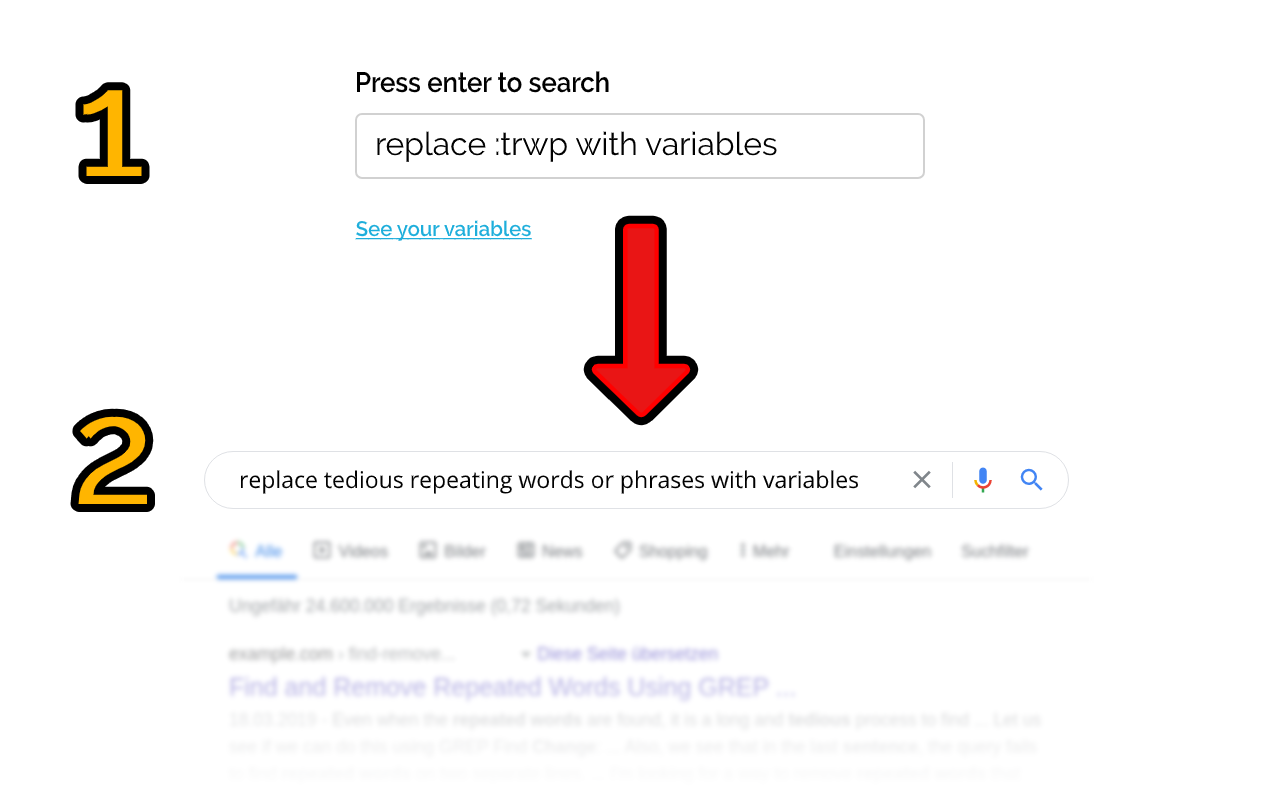
<style>
.page{position:relative;width:1280px;height:800px;background:#ffffff}
.page>*{position:absolute;margin:0}
.t1{font:28px "Raleway-SemiBold";color:#000000;scale:0.92 1}
.t2{font:150px "Raleway-Regular";color:#ffb500;font-weight:bold}
.t3{font:32px "Raleway-Regular";color:#000000}
.t4{font:21px "Raleway-SemiBold";color:#1eaedb;text-decoration:underline;scale:0.97 1}
.t5{font:23px "OpenSans-Regular";color:#000000}
</style>
<div class="page">
<p class="t1" style="left:357px;top:71px;width:252px;height:22px">Press enter to search</p>
<p class="t2" style="left:83px;top:90px;width:59px;height:86px">1</p>
<p class="t3" style="left:377px;top:131px;width:400px;height:31px">replace :trwp with variables</p>
<p class="t4" style="left:355px;top:220px;width:177px;height:21px">See your variables</p>
<p class="t2" style="left:78px;top:416px;width:69px;height:88px">2</p>
<p class="t5" style="left:240px;top:470px;width:619px;height:24px">replace tedious repeating words or phrases with variables</p>
</div>
